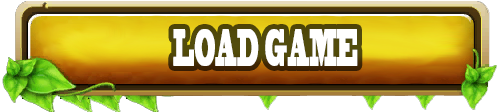
<style>
.page{position:relative;width:500px;height:112px;background:#ffffff}
.page>*{position:absolute;margin:0}
.t1{font:49.4px "BlackoakStd";color:#ffffff;scale:0.24 1}
</style>
<div class="page">
<p class="t1" style="left:173px;top:29px;width:185px;height:37px">LOAD GAME</p>
</div>
